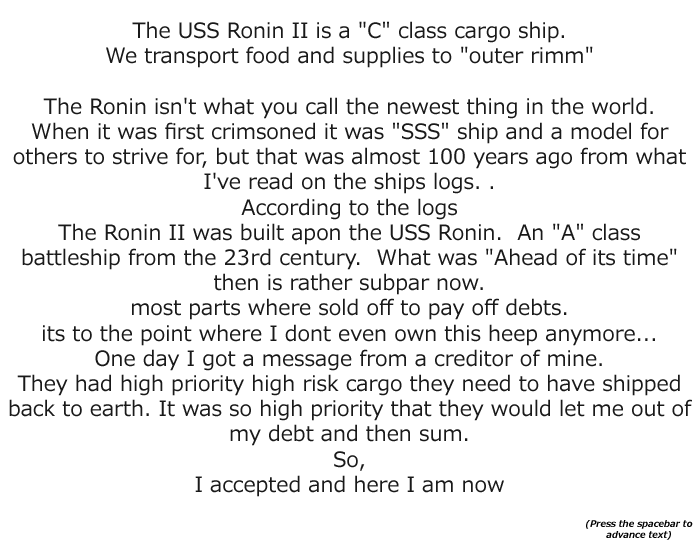
<style>
.page{position:relative;width:700px;height:550px;background:#ffffff}
.page>*{position:absolute;margin:0}
.t1{font:21px "Meiryo";color:#191919}
.t2{font:9px "Meiryo-BoldItalic";color:#000000}
</style>
<div class="page">
<p class="t1" style="left:9px;top:21px;width:683px;height:476px;text-align:center">The USS Ronin II is a "C" class cargo ship.                                We transport food and supplies to "outer rimm"<br>                                                                                             The Ronin isn't what you call the newest thing in the world.     When it was first crimsoned it was "SSS" ship and a model for others to strive for, but that was almost 100 years ago from what I've read on the ships logs. .                                                                                                                                                                                                                                                                         According to the logs                                                                The Ronin II was built apon the USS Ronin.  An "A" class battleship from the 23rd century.  What was "Ahead of its time" then is rather subpar now.                                                         most parts where sold off to pay off debts.                                 its to the point where I dont even own this heep anymore...             One day I got a message from a creditor of mine.                  They had high priority high risk cargo they need to have shipped back to earth. It was so high priority that they would let me out of my debt and then sum.                                                              So,                                                                                              I accepted and here I am now</p>
<p class="t2" style="left:586px;top:520px;width:107px;height:20px;text-align:center">(Press the spacebar to      advance text)</p>
</div>
